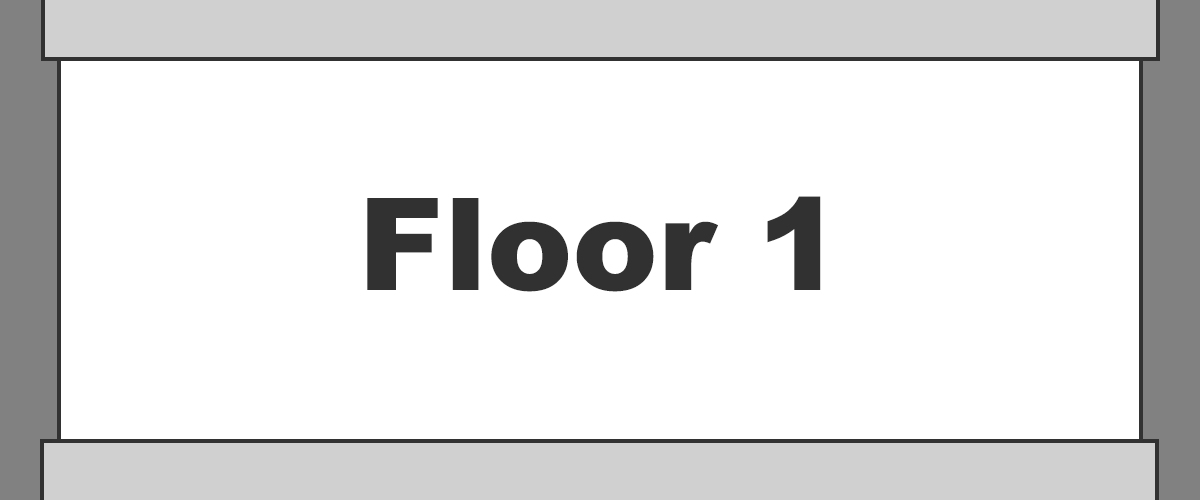
<style>
.page{position:relative;width:1200px;height:500px;background:#ffffff}
.page>*{position:absolute;margin:0}
.t1{font:128px "Arial-Black";color:#313131}
</style>
<div class="page">
<p class="t1" style="left:367px;top:196px;width:454px;height:96px">Floor 1</p>
</div>
